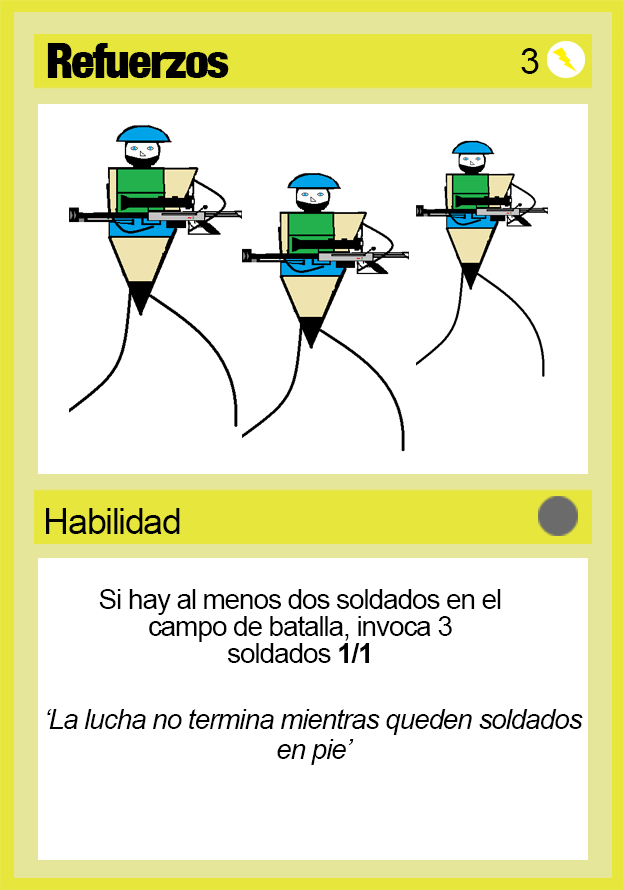
<style>
.page{position:relative;width:624px;height:890px;background:#ffffff}
.page>*{position:absolute;margin:0}
.t1{font:48px "Harvest";letter-spacing:-0.04em;color:#000000}
.t2{font:36px "ArialMT";letter-spacing:-0.04em;color:#000000}
.t3{font:28px/27px "ArialMT";letter-spacing:-0.04em;color:#000000}
.t4{font:28px/27px "Arial-BoldMT";letter-spacing:-0.04em;color:#000000}
.t5{font:28px/30px "Arial-ItalicMT";letter-spacing:-0.04em;color:#000000}
.t6{font:28px/54px "Arial-ItalicMT";letter-spacing:-0.04em;color:#000000}
</style>
<div class="page">
<p class="t1" style="left:47px;top:43px;width:182px;height:35px">Refuerzos</p>
<p class="t2" style="left:521px;top:48px;width:18px;height:26px">3</p>
<p class="t2" style="left:46px;top:508px;width:134px;height:26px">Habilidad</p>
<p class="t3" style="left:99px;top:589px;width:402px;height:74px;text-align:center">Si hay al menos dos soldados en el campo de batalla, invoca 3 soldados <span class="t4">1/1</span></p>
<p class="t5" style="left:47px;top:709px;width:536px;height:56px;text-align:center"><span class="t6">‘</span>La lucha no termina mientras queden soldados en pie’</p>
</div>
